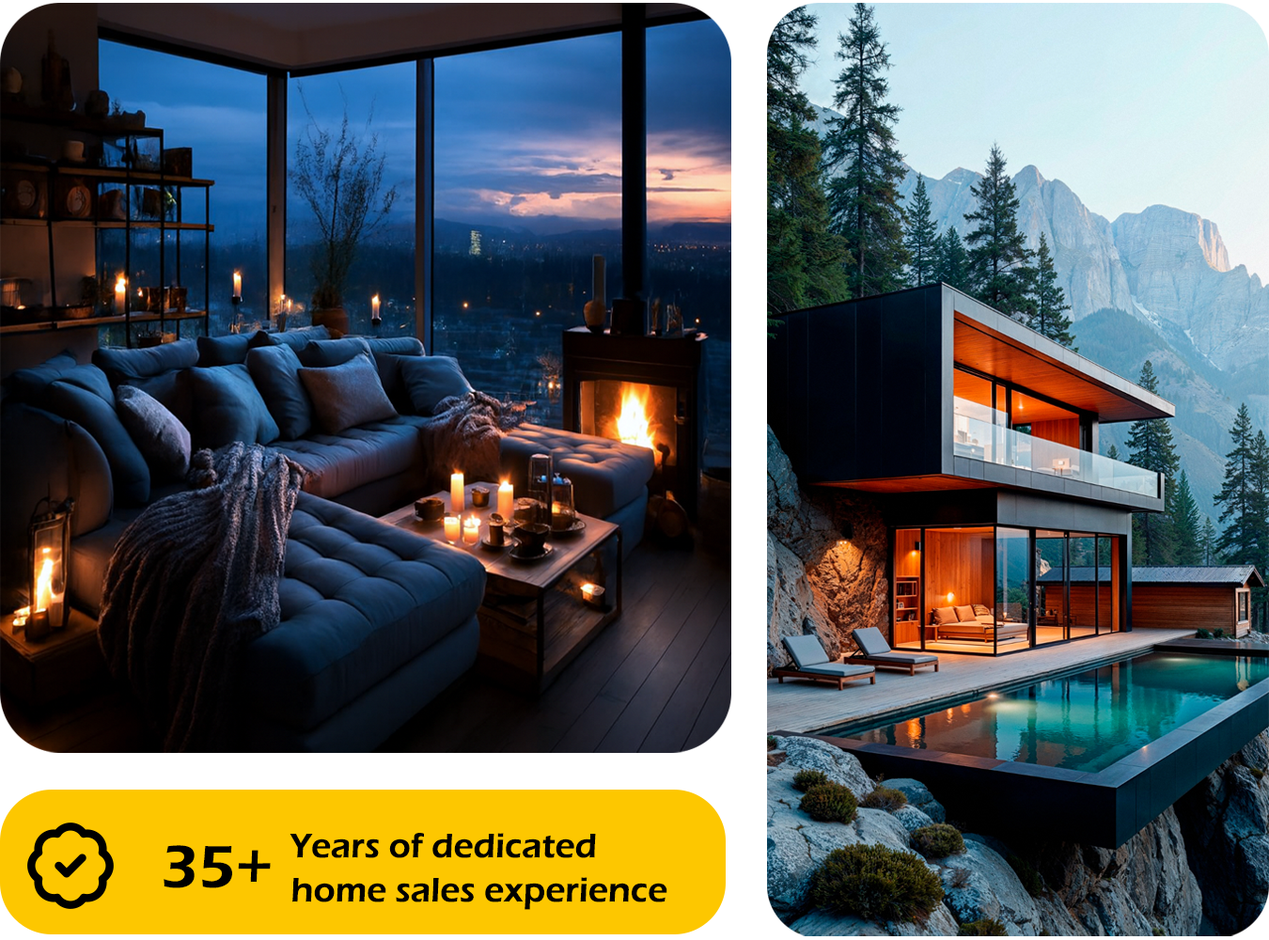
<style>
.page{position:relative;width:1269px;height:940px}
.page>*{position:absolute;margin:0}
.t1{font:35.2px "ErasITC-Demi";color:#000000}
.t2{font:61.3px "ErasITC-Demi";color:#000000}
</style>
<div class="page">
<p class="t1" style="left:289px;top:833px;width:307px;height:25px">Years of dedicated</p>
<p class="t2" style="left:164px;top:845px;width:107px;height:43px">35+</p>
<p class="t1" style="left:292px;top:877px;width:375px;height:33px">home sales experience</p>
</div>
